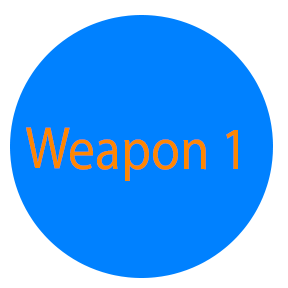
<style>
.page{position:relative;width:288px;height:288px;background:#0081ff}
.page>*{position:absolute;margin:0}
.t1{font:60px "MyriadPro-Regular";color:#ff8700;scale:0.89 1}
</style>
<div class="page">
<p class="t1" style="left:26px;top:127px;width:212px;height:54px">Weapon 1</p>
</div>
